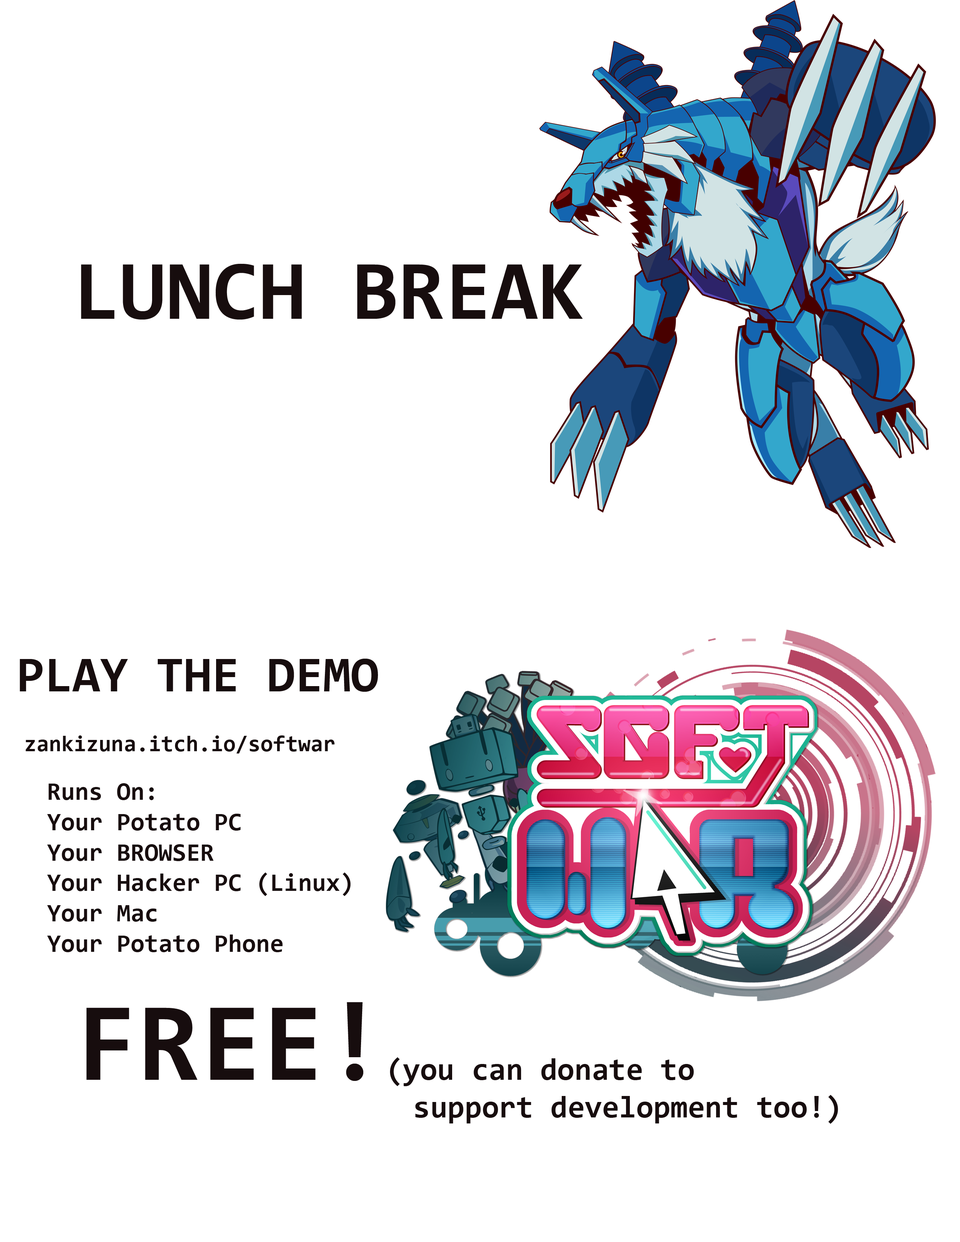
<style>
.page{position:relative;width:960px;height:1242px;background:#ffffff}
.page>*{position:absolute;margin:0}
.t1{font:84.5px "Consolas-Bold";color:#170d0e}
.t2{font:50.6px "Consolas-Bold";color:#170d0e}
.t3{font:22.6px "Consolas-Bold";color:#170d0e}
.t4{font:25.4px "Consolas-Bold";color:#170d0e}
.t5{font:31.2px "Consolas-Bold";color:#170d0e}
.t6{font:112.5px "Consolas-Bold";color:#170d0e}
</style>
<div class="page">
<p class="t1" style="left:81px;top:264px;width:502px;height:56px">LUNCH BREAK</p>
<p class="t2" style="left:20px;top:659px;width:358px;height:33px">PLAY THE DEMO</p>
<p class="t3" style="left:26px;top:736px;width:309px;height:18px">zankizuna.itch.io/softwar</p>
<p class="t4" style="left:47px;top:783px;width:303px;height:169px">Runs On:<br>Your Potato PC<br>Your BROWSER<br>Your Hacker PC (Linux)<br>Your Mac<br>Your Potato Phone</p>
<p class="t5" style="left:86px;top:1002px;width:752px;height:122px"><span class="t6">FREE!</span>(you can donate to <br>     support development too!)</p>
</div>
